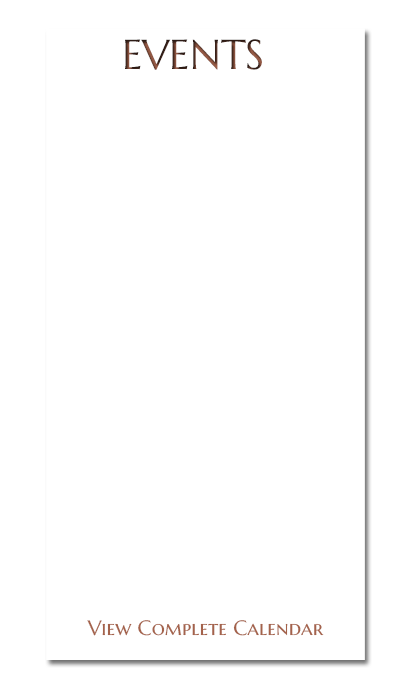
<style>
.page{position:relative;width:400px;height:700px;background:#ffffff}
.page>*{position:absolute;margin:0}
.t1{font:41.7px "MarcellusSC-Regular"}
.t2{font:20.8px "MarcellusSC-Regular";color:#a4624b}
</style>
<div class="page">
<p class="t1" style="left:125px;top:39px;width:137px;height:31px">EVENTS</p>
<p class="t2" style="left:87px;top:620px;width:237px;height:16px">View Complete Calendar</p>
</div>
